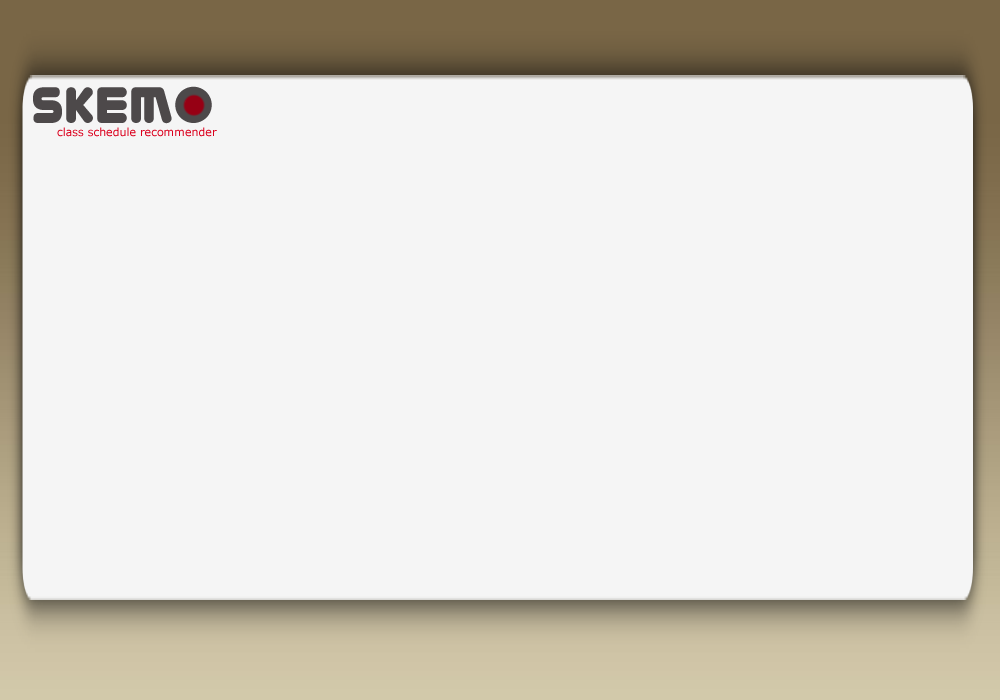
<style>
.page{position:relative;width:1000px;height:700px;background:#f5f5f5}
.page>*{position:absolute;margin:0}
.t1{font:59.8px "You'reGone";color:#4d494a}
.t2{font:11px "Verdana";color:#db001d}
</style>
<div class="page">
<p class="t1" style="left:33px;top:86px;width:179px;height:38px">skemo</p>
<p class="t2" style="left:57px;top:127px;width:160px;height:10px">class schedule recommender</p>
</div>
